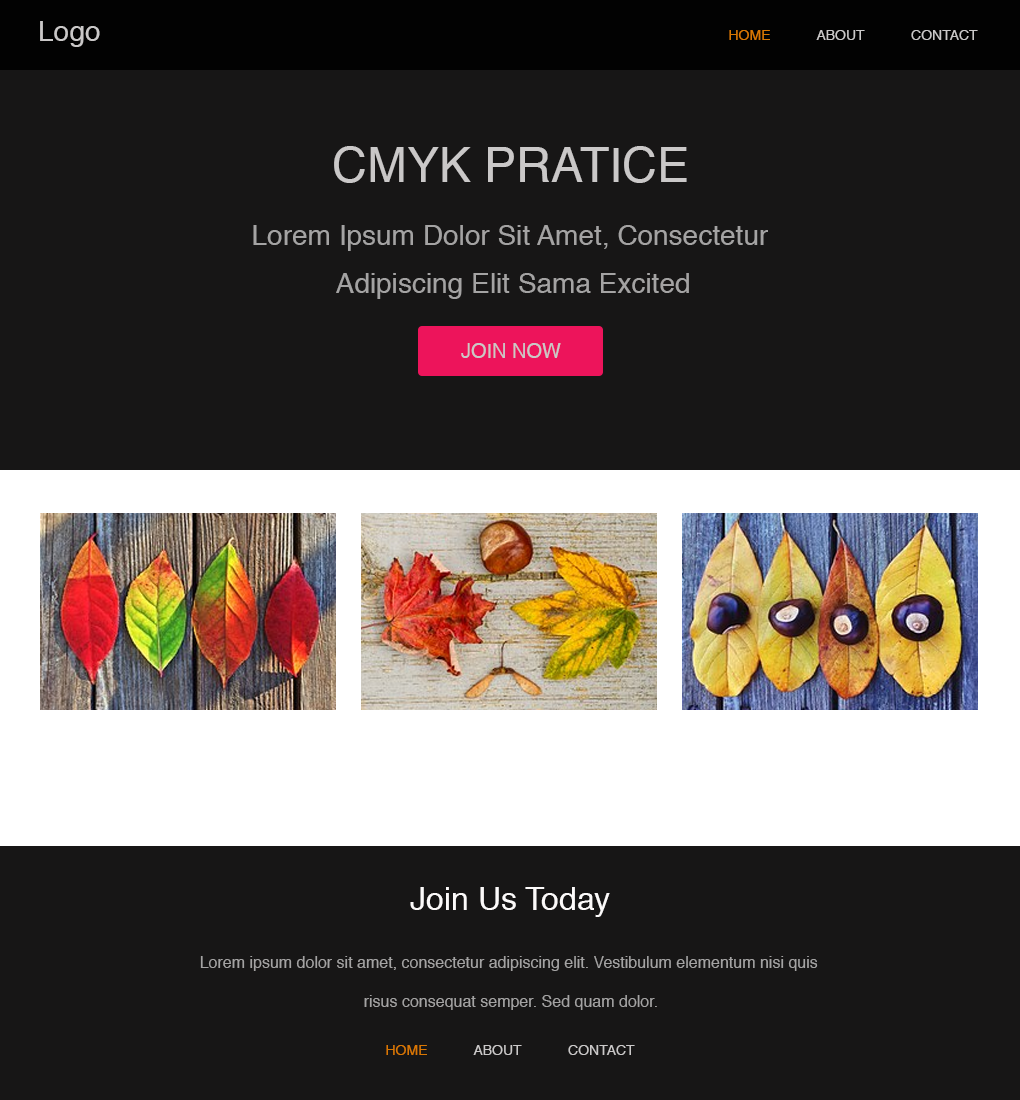
<style>
.page{position:relative;width:1020px;height:1100px;background:#171616}
.page>*{position:absolute;margin:0}
.t1{font:28px "Helvetica";color:#cac8c8}
.t2{font:14px "Helvetica";color:#cac8c8}
.t3{font:14px "Helvetica";color:#d97703}
.t4{font:48px "Helvetica";color:#cac8c8}
.t5{font:28px/48px "Helvetica";color:#a4a3a3}
.t6{font:20px "Helvetica";color:#cac8c8}
.t7{font:32px "Helvetica";color:#fcfafa}
.t8{font:16px/39.1px "Helvetica";color:#a4a3a3}
</style>
<div class="page">
<p class="t1" style="left:40px;top:21px;width:60px;height:26px">Logo</p>
<p class="t2" style="left:729px;top:30px;width:249px;height:10px"><span class="t3">HOME</span>            ABOUT            CONTACT</p>
<p class="t4" style="left:334px;top:146px;width:353px;height:37px">CMYK PRATICE</p>
<p class="t5" style="left:253px;top:225px;width:515px;height:74px;text-align:center">Lorem Ipsum Dolor Sit Amet, Consectetur<br> Adipiscing Elit Sama Excited</p>
<p class="t6" style="left:461px;top:343px;width:100px;height:15px">JOIN NOW</p>
<p class="t7" style="left:410px;top:887px;width:200px;height:30px">Join Us Today</p>
<p class="t8" style="left:200px;top:956px;width:618px;height:54px;text-align:center">Lorem ipsum dolor sit amet, consectetur adipiscing elit. Vestibulum elementum nisi quis<br> risus consequat semper. Sed quam dolor.</p>
<p class="t2" style="left:386px;top:1045px;width:249px;height:10px"><span class="t3">HOME</span>            ABOUT            CONTACT</p>
</div>
